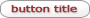
<style>
.page{position:relative;width:90px;height:18px;background:#ffffff}
.page>*{position:absolute;margin:0}
.t1{font:9px "Verdana";letter-spacing:-0.02em;color:#993333;font-weight:bold;scale:1.3 1}
</style>
<div class="page">
<p class="t1" style="left:11px;top:5px;width:66px;height:8px">button title</p>
</div>
